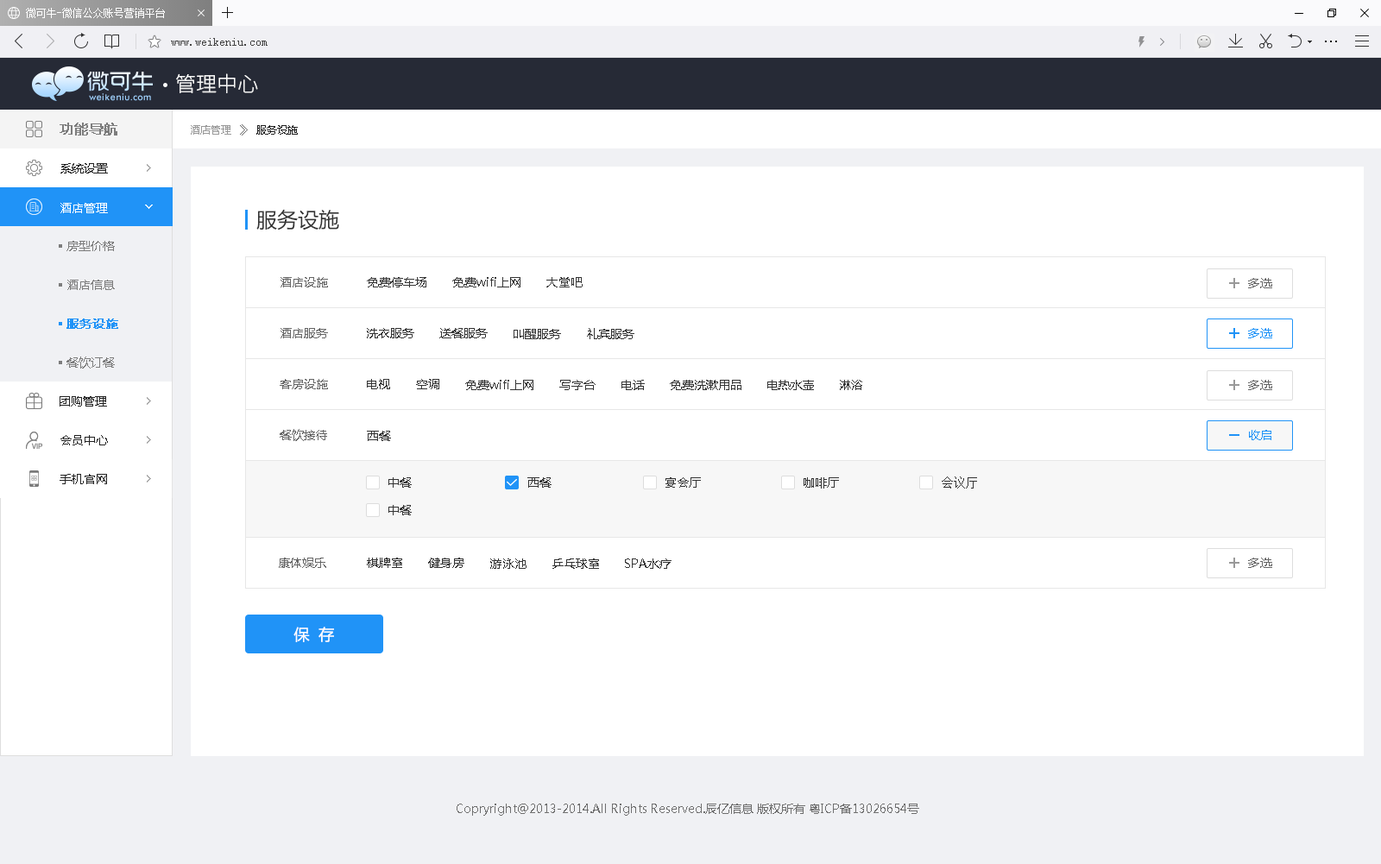
<style>
.page{position:relative;width:1381px;height:864px;background:#ffffff}
.page>*{position:absolute;margin:0}
.t1{font:20.7px "SourceHanSansCN-Light";color:#e1e1e1}
.t2{font:13.8px "MicrosoftYaHei";color:#7d7d7d;font-weight:bold}
.t3{font:10.4px "MicrosoftYaHei";color:#999999}
.t4{font:12.1px "SimSun";color:#666666}
.t5{font:10.4px "MicrosoftYaHei";color:#222222}
.t6{font:12.1px "MicrosoftYaHei";color:#222222}
.t7{font:12.1px "MicrosoftYaHei";color:#fefefe}
.t8{font:20.7px "MicrosoftYaHei";color:#333333}
.t9{font:12.1px "MicrosoftYaHei";color:#7d7d7d}
.t10{font:12.1px "MicrosoftYaHei";color:#666666}
.t11{font:12.1px "MicrosoftYaHei";color:#333333}
.t12{font:12.1px "MicrosoftYaHei";color:#2093f7;font-weight:bold}
.t13{font:12.1px "MicrosoftYaHei";color:#2093f7}
.t14{font:12.1px "SimSun";color:#333333}
.t15{font:15.5px "MicrosoftYaHei";color:#ffffff}
.t16{font:12.1px "MicrosoftYaHei";color:#6f6f6f}
</style>
<div class="page">
<p class="t1" style="left:176px;top:73px;width:82px;height:20px">管理中心</p>
<p class="t2" style="left:60px;top:123px;width:57px;height:12px">功能导航</p>
<p class="t3" style="left:191px;top:125px;width:40px;height:10px">酒店管理</p>
<p class="t4" style="left:240px;top:124px;width:8px;height:11px">》</p>
<p class="t5" style="left:256px;top:125px;width:42px;height:10px">服务设施</p>
<p class="t6" style="left:60px;top:163px;width:48px;height:10px">系统设置</p>
<p class="t7" style="left:60px;top:203px;width:48px;height:10px">酒店管理</p>
<p class="t8" style="left:256px;top:209px;width:83px;height:21px">服务设施</p>
<p class="t9" style="left:66px;top:241px;width:49px;height:10px">房型价格</p>
<p class="t9" style="left:67px;top:280px;width:48px;height:10px">酒店信息</p>
<p class="t10" style="left:280px;top:277px;width:48px;height:10px">酒店设施</p>
<p class="t11" style="left:367px;top:277px;width:59px;height:10px">免费停车场</p>
<p class="t11" style="left:452px;top:277px;width:68px;height:10px">免费wifi上网</p>
<p class="t11" style="left:546px;top:277px;width:36px;height:10px">大堂吧</p>
<p class="t10" style="left:1248px;top:278px;width:24px;height:10px">多选</p>
<p class="t12" style="left:66px;top:318px;width:52px;height:11px">服务设施</p>
<p class="t10" style="left:280px;top:328px;width:48px;height:10px">酒店服务</p>
<p class="t11" style="left:367px;top:328px;width:47px;height:10px">洗衣服务</p>
<p class="t11" style="left:439px;top:328px;width:49px;height:10px">送餐服务</p>
<p class="t11" style="left:513px;top:329px;width:48px;height:10px">叫醒服务</p>
<p class="t11" style="left:587px;top:328px;width:47px;height:11px">礼宾服务</p>
<p class="t13" style="left:1248px;top:328px;width:24px;height:10px">多选</p>
<p class="t9" style="left:66px;top:356px;width:49px;height:12px">餐饮订餐</p>
<p class="t10" style="left:280px;top:379px;width:48px;height:10px">客房设施</p>
<p class="t11" style="left:367px;top:379px;width:23px;height:10px">电视</p>
<p class="t11" style="left:416px;top:379px;width:23px;height:10px">空调</p>
<p class="t11" style="left:465px;top:380px;width:68px;height:10px">免费wifi上网</p>
<p class="t11" style="left:559px;top:380px;width:36px;height:10px">写字台</p>
<p class="t11" style="left:621px;top:380px;width:24px;height:10px">电话</p>
<p class="t11" style="left:670px;top:380px;width:71px;height:10px">免费洗漱用品</p>
<p class="t11" style="left:767px;top:380px;width:47px;height:10px">电热水壶</p>
<p class="t11" style="left:840px;top:380px;width:22px;height:10px">淋浴</p>
<p class="t10" style="left:1248px;top:380px;width:24px;height:10px">多选</p>
<p class="t6" style="left:60px;top:396px;width:47px;height:10px">团购管理</p>
<p class="t6" style="left:60px;top:435px;width:48px;height:10px">会员中心</p>
<p class="t10" style="left:280px;top:429px;width:47px;height:12px">餐饮接待</p>
<p class="t11" style="left:367px;top:431px;width:24px;height:10px">西餐</p>
<p class="t13" style="left:1249px;top:430px;width:22px;height:10px">收启</p>
<p class="t6" style="left:60px;top:474px;width:47px;height:10px">手机官网</p>
<p class="t11" style="left:388px;top:477px;width:24px;height:11px">中餐</p>
<p class="t11" style="left:527px;top:477px;width:24px;height:11px">西餐</p>
<p class="t11" style="left:665px;top:477px;width:36px;height:11px">宴会厅</p>
<p class="t11" style="left:803px;top:477px;width:36px;height:11px">咖啡厅</p>
<p class="t14" style="left:941px;top:476px;width:36px;height:12px">会议厅</p>
<p class="t11" style="left:388px;top:505px;width:24px;height:10px">中餐</p>
<p class="t10" style="left:279px;top:557px;width:47px;height:11px">康体娱乐</p>
<p class="t11" style="left:367px;top:557px;width:35px;height:11px">棋牌室</p>
<p class="t11" style="left:428px;top:557px;width:36px;height:11px">健身房</p>
<p class="t10" style="left:1248px;top:557px;width:24px;height:11px">多选</p>
<p class="t11" style="left:490px;top:558px;width:36px;height:11px">游泳池</p>
<p class="t11" style="left:552px;top:558px;width:47px;height:11px">乒乓球室</p>
<p class="t11" style="left:625px;top:558px;width:46px;height:11px">SPA水疗</p>
<p class="t15" style="left:293px;top:626px;width:41px;height:16px">保  存</p>
<p class="t16" style="left:456px;top:803px;width:463px;height:12px">Copryright@2013-2014.All Rights Reserved.辰亿信息 版权所有 粤ICP备13026654号</p>
</div>
